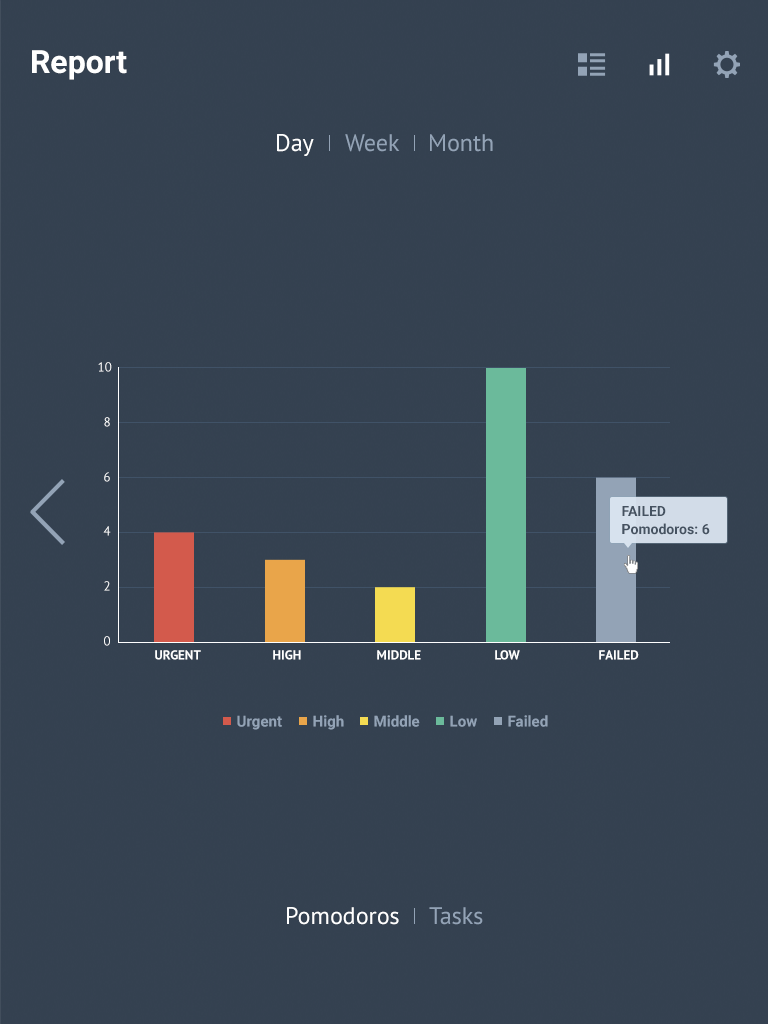
<style>
.page{position:relative;width:768px;height:1024px;background:#344150}
.page>*{position:absolute;margin:0}
.t1{font:32px "Roboto-Bold";color:#ffffff}
.t2{font:24px "PTSans-Regular";color:#ffffff}
.t3{font:24px "PTSans-Regular";color:#93a3b6}
.t4{font:13px "PTSans-Regular";color:#ffffff}
.t5{font:13px "PTSans-Regular"}
.t6{font:14px "Roboto-Bold";color:#455261}
.t7{font:13px "PTSans-Bold";color:#ffffff;text-transform:uppercase}
.t8{font:15px "Roboto-Bold";color:#93a3b6}
</style>
<div class="page">
<p class="t1" style="left:32px;top:50px;width:95px;height:30px">Report</p>
<p class="t2" style="left:277px;top:134px;width:37px;height:22px">Day</p>
<p class="t3" style="left:345px;top:134px;width:55px;height:18px">Week</p>
<p class="t3" style="left:430px;top:134px;width:63px;height:18px">Month</p>
<p class="t4" style="left:98px;top:362px;width:14px;height:10px">10</p>
<p class="t4" style="left:104px;top:417px;width:6px;height:10px">8</p>
<p class="t5" style="left:104px;top:472px;width:6px;height:10px">6</p>
<p class="t6" style="left:622px;top:506px;width:44px;height:10px">FAILED</p>
<p class="t5" style="left:103px;top:526px;width:8px;height:10px">4</p>
<p class="t6" style="left:622px;top:523px;width:88px;height:12px">Pomodoros: 6</p>
<p class="t4" style="left:104px;top:581px;width:6px;height:10px">2</p>
<p class="t4" style="left:104px;top:636px;width:6px;height:10px">0</p>
<p class="t7" style="left:155px;top:650px;width:46px;height:10px">Urgent</p>
<p class="t7" style="left:273px;top:650px;width:28px;height:10px">High</p>
<p class="t7" style="left:377px;top:650px;width:44px;height:10px">Middle</p>
<p class="t7" style="left:495px;top:650px;width:25px;height:10px">Low</p>
<p class="t7" style="left:599px;top:650px;width:40px;height:10px">Failed</p>
<p class="t8" style="left:237px;top:715px;width:45px;height:15px">Urgent</p>
<p class="t8" style="left:313px;top:715px;width:31px;height:15px">High</p>
<p class="t8" style="left:374px;top:715px;width:46px;height:12px">Middle</p>
<p class="t8" style="left:450px;top:715px;width:27px;height:12px">Low</p>
<p class="t8" style="left:508px;top:715px;width:40px;height:12px">Failed</p>
<p class="t2" style="left:287px;top:907px;width:112px;height:18px">Pomodoros</p>
<p class="t3" style="left:429px;top:907px;width:54px;height:18px">Tasks</p>
</div>
